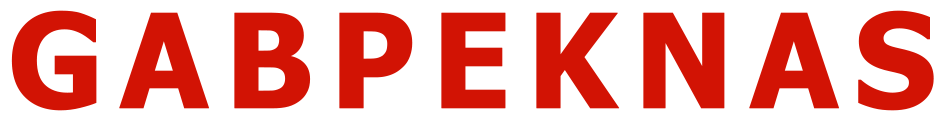
<style>
.page{position:relative;width:951px;height:118px;background:#ffffff}
.page>*{position:absolute;margin:0}
.t1{font:129.8px "Tahoma-Bold";letter-spacing:0.1em;color:#d21304;text-transform:uppercase;font-weight:bold}
</style>
<div class="page">
<p class="t1" style="left:11px;top:10px;width:923px;height:101px">GABPEKNAS</p>
</div>
